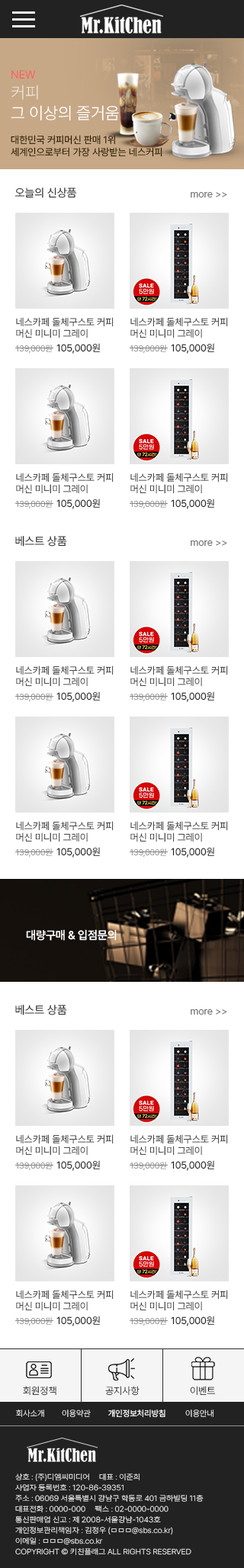
<style>
.page{position:relative;width:244px;height:1568px;background:#ffffff}
.page>*{position:absolute;margin:0}
.t1{font:16.8px "PretendardVariable-Light";letter-spacing:-0.005em;color:#ffffff}
.t2{font:11.4px "PretendardVariable-Light";letter-spacing:-0.005em;color:#f75e5e}
.t3{font:16.8px "PretendardVariable-Thin";letter-spacing:-0.005em;color:#ffffff}
.t4{font:9.9px "PretendardVariable-Regular";letter-spacing:-0.005em;color:#2d1f00}
.t5{font:11.4px "PretendardVariable-Regular";letter-spacing:-0.005em;color:#333333}
.t6{font:9.9px "PretendardVariable-Regular";letter-spacing:-0.005em;color:#777777}
.t7{font:9.9px "PretendardVariable-Light";letter-spacing:-0.005em;color:#222222}
.t8{font:8.4px "PretendardVariable-Light";letter-spacing:-0.005em;color:#888888}
.t9{font:9.9px "PretendardVariable-Regular";letter-spacing:-0.005em;color:#222222}
.t10{font:11.4px "PretendardVariable-Medium";letter-spacing:-0.005em;color:#ffffff}
.t11{font:9.9px "PretendardVariable-Light";letter-spacing:-0.005em}
.t12{font:8.4px "PretendardVariable-ExtraLight";letter-spacing:-0.005em}
.t13{font:8.4px "PretendardVariable-Regular";letter-spacing:-0.005em;color:#ffffff}
.t14{font:8.4px "PretendardVariable-ExtraLight";letter-spacing:-0.005em;color:#ffffff}
.t15{font:7.6px/10.7px "PretendardVariable-ExtraLight";letter-spacing:-0.005em;color:#fefefe;scale:1.08 1}
</style>
<div class="page">
<p class="t1" style="left:11px;top:70px;width:108px;height:50px"><span class="t2">NEW<br></span><span class="t3">커피<br></span>그 이상의 즐거움</p>
<p class="t4" style="left:11px;top:135px;width:151px;height:22px">대한민국 커피머신 판매 1위<br>세계인으로부터 가장 사랑받는 네스커피</p>
<p class="t5" style="left:14px;top:188px;width:63px;height:10px">오늘의 신상품</p>
<p class="t6" style="left:191px;top:191px;width:36px;height:7px">more &gt;&gt;</p>
<p class="t7" style="left:16px;top:317px;width:98px;height:21px">네스카페 돌체구스토 커피<br>머신 미니미 그레이</p>
<p class="t7" style="left:130px;top:317px;width:98px;height:21px">네스카페 돌체구스토 커피<br>머신 미니미 그레이</p>
<p class="t8" style="left:15px;top:345px;width:37px;height:9px">139,000원</p>
<p class="t9" style="left:56px;top:343px;width:44px;height:11px">105,000원</p>
<p class="t8" style="left:130px;top:345px;width:36px;height:9px">139,000원</p>
<p class="t9" style="left:171px;top:343px;width:43px;height:11px">105,000원</p>
<p class="t7" style="left:16px;top:473px;width:98px;height:21px">네스카페 돌체구스토 커피<br>머신 미니미 그레이</p>
<p class="t7" style="left:130px;top:473px;width:98px;height:21px">네스카페 돌체구스토 커피<br>머신 미니미 그레이</p>
<p class="t8" style="left:15px;top:500px;width:37px;height:9px">139,000원</p>
<p class="t9" style="left:56px;top:499px;width:44px;height:10px">105,000원</p>
<p class="t8" style="left:130px;top:500px;width:36px;height:9px">139,000원</p>
<p class="t9" style="left:171px;top:499px;width:43px;height:10px">105,000원</p>
<p class="t5" style="left:15px;top:536px;width:52px;height:11px">베스트 상품</p>
<p class="t6" style="left:191px;top:540px;width:36px;height:7px">more &gt;&gt;</p>
<p class="t7" style="left:16px;top:665px;width:98px;height:22px">네스카페 돌체구스토 커피<br>머신 미니미 그레이</p>
<p class="t7" style="left:130px;top:665px;width:98px;height:22px">네스카페 돌체구스토 커피<br>머신 미니미 그레이</p>
<p class="t8" style="left:15px;top:693px;width:37px;height:9px">139,000원</p>
<p class="t9" style="left:56px;top:691px;width:44px;height:11px">105,000원</p>
<p class="t8" style="left:130px;top:693px;width:36px;height:9px">139,000원</p>
<p class="t9" style="left:171px;top:691px;width:43px;height:11px">105,000원</p>
<p class="t7" style="left:16px;top:821px;width:98px;height:21px">네스카페 돌체구스토 커피<br>머신 미니미 그레이</p>
<p class="t7" style="left:130px;top:821px;width:98px;height:21px">네스카페 돌체구스토 커피<br>머신 미니미 그레이</p>
<p class="t8" style="left:15px;top:848px;width:37px;height:10px">139,000원</p>
<p class="t9" style="left:56px;top:847px;width:44px;height:11px">105,000원</p>
<p class="t8" style="left:130px;top:848px;width:36px;height:10px">139,000원</p>
<p class="t9" style="left:171px;top:847px;width:43px;height:11px">105,000원</p>
<p class="t10" style="left:26px;top:929px;width:91px;height:12px">대량구매 &amp; 입점문의</p>
<p class="t5" style="left:15px;top:1005px;width:52px;height:10px">베스트 상품</p>
<p class="t6" style="left:191px;top:1008px;width:36px;height:7px">more &gt;&gt;</p>
<p class="t7" style="left:16px;top:1134px;width:98px;height:22px">네스카페 돌체구스토 커피<br>머신 미니미 그레이</p>
<p class="t7" style="left:130px;top:1134px;width:98px;height:22px">네스카페 돌체구스토 커피<br>머신 미니미 그레이</p>
<p class="t8" style="left:15px;top:1162px;width:37px;height:9px">139,000원</p>
<p class="t9" style="left:56px;top:1160px;width:44px;height:11px">105,000원</p>
<p class="t8" style="left:130px;top:1162px;width:36px;height:9px">139,000원</p>
<p class="t9" style="left:171px;top:1160px;width:43px;height:11px">105,000원</p>
<p class="t7" style="left:16px;top:1290px;width:98px;height:21px">네스카페 돌체구스토 커피<br>머신 미니미 그레이</p>
<p class="t7" style="left:130px;top:1290px;width:98px;height:21px">네스카페 돌체구스토 커피<br>머신 미니미 그레이</p>
<p class="t8" style="left:15px;top:1317px;width:37px;height:9px">139,000원</p>
<p class="t9" style="left:56px;top:1316px;width:44px;height:10px">105,000원</p>
<p class="t8" style="left:130px;top:1317px;width:36px;height:9px">139,000원</p>
<p class="t9" style="left:171px;top:1316px;width:43px;height:10px">105,000원</p>
<p class="t7" style="left:23px;top:1386px;width:33px;height:10px">회원정책</p>
<p class="t11" style="left:105px;top:1386px;width:34px;height:10px">공지사항</p>
<p class="t7" style="left:190px;top:1386px;width:26px;height:10px">이벤트</p>
<p class="t12" style="left:16px;top:1409px;width:28px;height:8px">회사소개</p>
<p class="t12" style="left:62px;top:1409px;width:29px;height:8px">이용약관</p>
<p class="t13" style="left:108px;top:1409px;width:57px;height:9px">개인정보처리방침</p>
<p class="t14" style="left:185px;top:1409px;width:28px;height:8px">이용안내</p>
<p class="t15" style="left:15px;top:1473px;width:189px;height:82px">상호 : (주)디엠씨미디어     대표 : 이준희     <br>사업자 등록번호 : 120-86-39351<br>주소 : 06069 서울특별시 강남구 학동로 401 금하빌딩 11층<br>대표전화 : 0000-000     팩스 : 02-0000-0000     <br>통신판매업 신고 : 제 2008-서울강남-1043호<br>개인정보관리책임자 : 김정우 (ㅁㅁㅁ@sbs.co.kr)     <br>이메일 : ㅁㅁㅁ@sbs.co.kr<br>COPYRIGHT © 키친플래그 ALL RIGHTS RESERVED</p>
</div>
